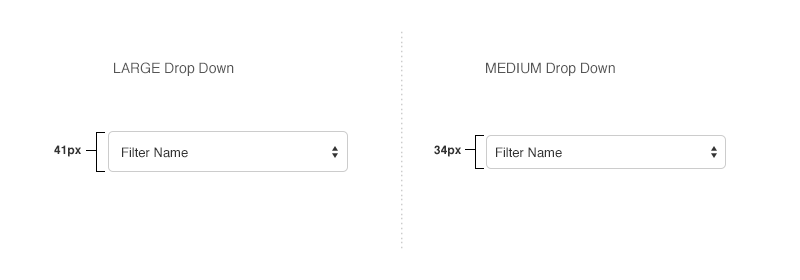
<style>
.page{position:relative;width:800px;height:280px;background:#ffffff}
.page>*{position:absolute;margin:0}
.t1{font:10px "HelveticaNeue-Medium";letter-spacing:0.2em;color:#cccccc}
.t2{font:14px "Helvetica";color:#555555}
.t3{font:12px "Helvetica-Bold";color:#333333}
.t4{font:13px "Helvetica";color:#333333}
</style>
<div class="page">
<p class="t1" style="left:401px;top:31px;width:2px;height:218px;rotate:90deg">..............................................</p>
<p class="t2" style="left:114px;top:62px;width:120px;height:14px">LARGE Drop Down</p>
<p class="t2" style="left:486px;top:62px;width:129px;height:14px">MEDIUM Drop Down</p>
<p class="t3" style="left:54px;top:145px;width:27px;height:12px">41px</p>
<p class="t4" style="left:122px;top:147px;width:66px;height:11px">Filter Name</p>
<p class="t3" style="left:434px;top:145px;width:27px;height:12px">34px</p>
<p class="t4" style="left:496px;top:147px;width:66px;height:11px">Filter Name</p>
</div>
